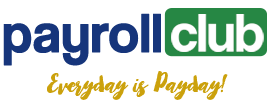
<style>
.page{position:relative;width:272px;height:109px;background:#ffffff}
.page>*{position:absolute;margin:0}
.t1{font:56.2px "CoolveticaRg-Regular";color:#16357b;font-weight:bold}
.t2{font:56.2px "CoolveticaRg-Regular";color:#ffffff}
.t3{font:56.2px "CoolveticaRg-Regular";color:#16357b}
.t4{font:23.7px "Mayton";color:#e3b514;font-style:italic;scale:1.04 1}
</style>
<div class="page">
<p class="t1" style="left:3px;top:13px;width:158px;height:53px">payroll</p>
<p class="t2" style="left:171px;top:14px;width:93px;height:38px"><span class="t3"> </span>club</p>
<p class="t4" style="left:47px;top:71px;width:181px;height:29px">Everyday is Payday!</p>
</div>
